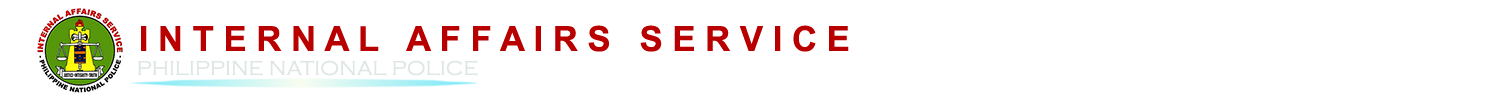
<style>
.page{position:relative;width:1500px;height:100px;background:#ffffff}
.page>*{position:absolute;margin:0}
.t1{font:34.7px "Arial-BoldMT";color:#b80000}
.t2{font:20.8px "CopperplateGothic-Light";color:#dfe7e5}
.t3{font:27.8px "CopperplateGothic-Light";color:#dfe7e5}
</style>
<div class="page">
<p class="t1" style="left:141px;top:25px;width:708px;height:27px">I N T E R N A L   A F F A I R S   S E R V I C E</p>
<p class="t2" style="left:138px;top:60px;width:340px;height:16px"><span class="t3">    </span>PHILIPPINE NATIONAL POLICE</p>
</div>
